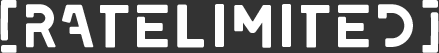
<style>
.page{position:relative;width:439px;height:53px;background:#333333}
.page>*{position:absolute;margin:0}
.t1{font:60px "LEIXO-Bold";color:#ffffff}
</style>
<div class="page">
<p class="t1" style="left:0px;top:0px;width:439px;height:53px">[RATELIMITED]</p>
</div>
